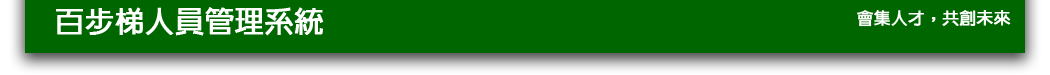
<style>
.page{position:relative;width:1050px;height:75px;background:#006600}
.page>*{position:absolute;margin:0}
.t1{font:29.2px "NewGothic-bold";color:#ffffff;font-weight:bold}
.t2{font:16.7px "NewGothic-bold";color:#ffffff;font-weight:bold}
</style>
<div class="page">
<p class="t1" style="left:56px;top:7px;width:268px;height:29px">百步梯人員管理系統</p>
<p class="t2" style="left:857px;top:10px;width:154px;height:17px">會集人才，共創未來</p>
</div>
